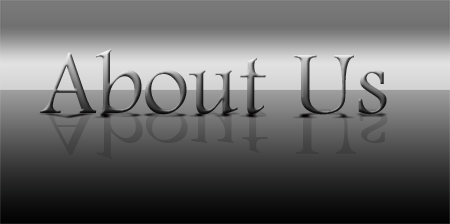
<style>
.page{position:relative;width:450px;height:224px}
.page>*{position:absolute;margin:0}
.t1{font:92.8px "FootlightMT-Light"}
</style>
<div class="page">
<p class="t1" style="left:40px;top:49px;width:347px;height:67px">About Us</p>
</div>
